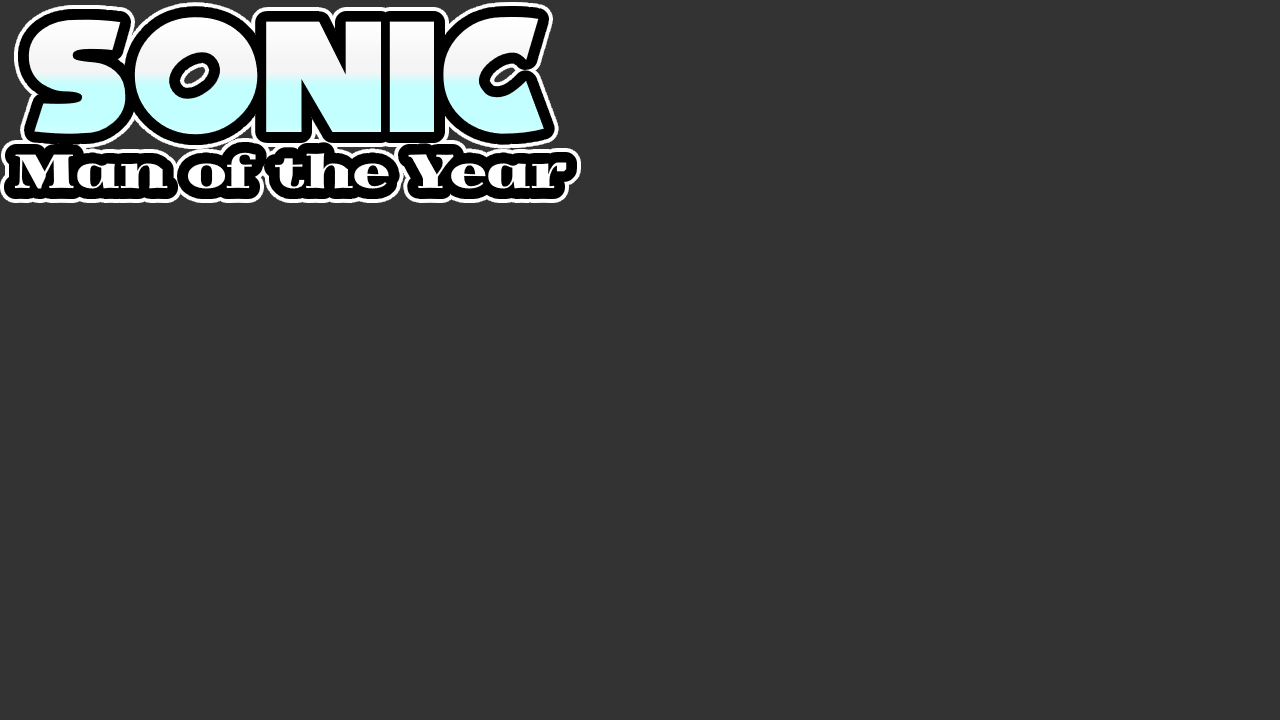
<style>
.page{position:relative;width:1280px;height:720px;background:#333333}
.page>*{position:absolute;margin:0}
.t1{font:46.4px "Yokawerad"}
.t2{font:141.3px "NiseSegaSonic"}
</style>
<div class="page">
<p class="t1" style="left:14px;top:16px;width:553px;height:173px;text-align:center"><span class="t2">Sonic<br></span>Man of the Year</p>
</div>
